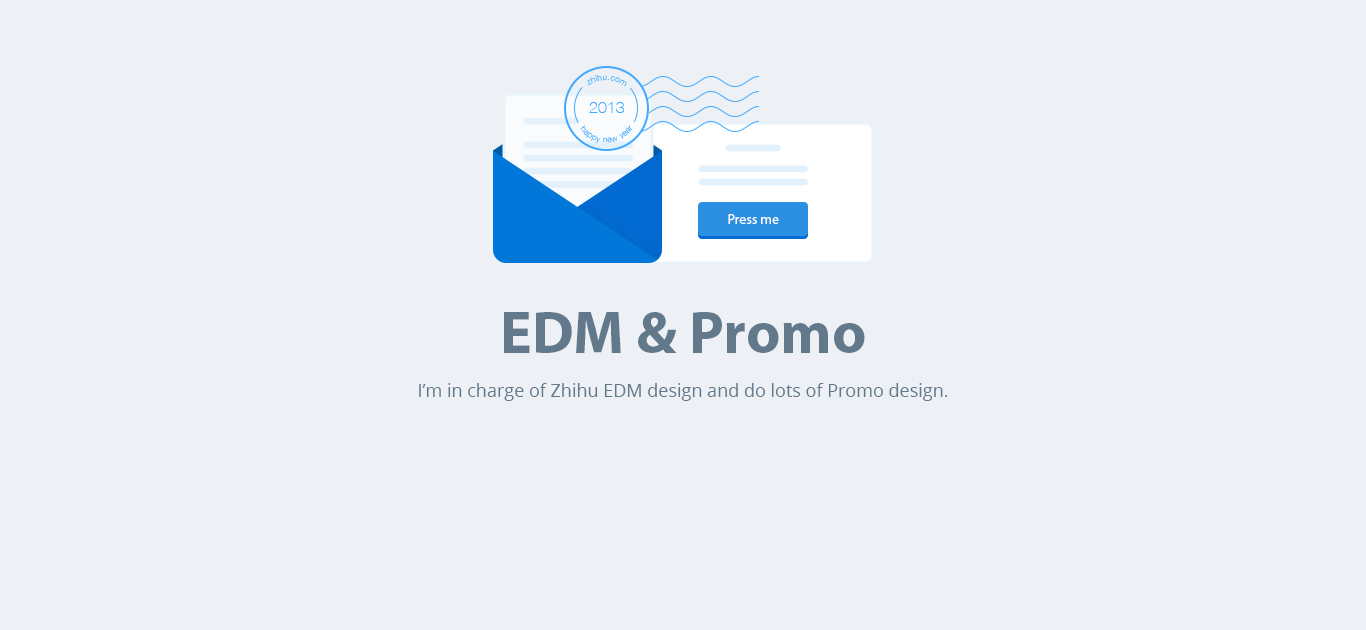
<style>
.page{position:relative;width:1366px;height:630px;background:#edf1f5}
.page>*{position:absolute;margin:0}
.t1{font:8px "HelveticaNeue-UltraLight";letter-spacing:0.08em}
.t2{font:16px "HelveticaNeue-Thin";color:#40a9ff}
.t3{font:8px "HelveticaNeue-UltraLight";letter-spacing:0.1em}
.t4{font:14px "MyriadPro-Regular";color:#ffffff}
.t5{font:60px "MyriadPro-Bold";color:#62798c}
.t6{font:18px "OpenSans";color:#62798c}
</style>
<div class="page">
<p class="t1" style="left:586px;top:74px;width:41px;height:13px;rotate:-32deg">zhihu.com</p>
<p class="t2" style="left:589px;top:102px;width:35px;height:11px">2013</p>
<p class="t3" style="left:580px;top:125px;width:53px;height:18px;rotate:-16deg">happy new year</p>
<p class="t4" style="left:728px;top:214px;width:51px;height:10px">Press me</p>
<p class="t5" style="left:504px;top:312px;width:361px;height:41px">EDM &amp; Promo</p>
<p class="t6" style="left:419px;top:383px;width:529px;height:18px">I’m in charge of Zhihu EDM design and do lots of Promo design.</p>
</div>
